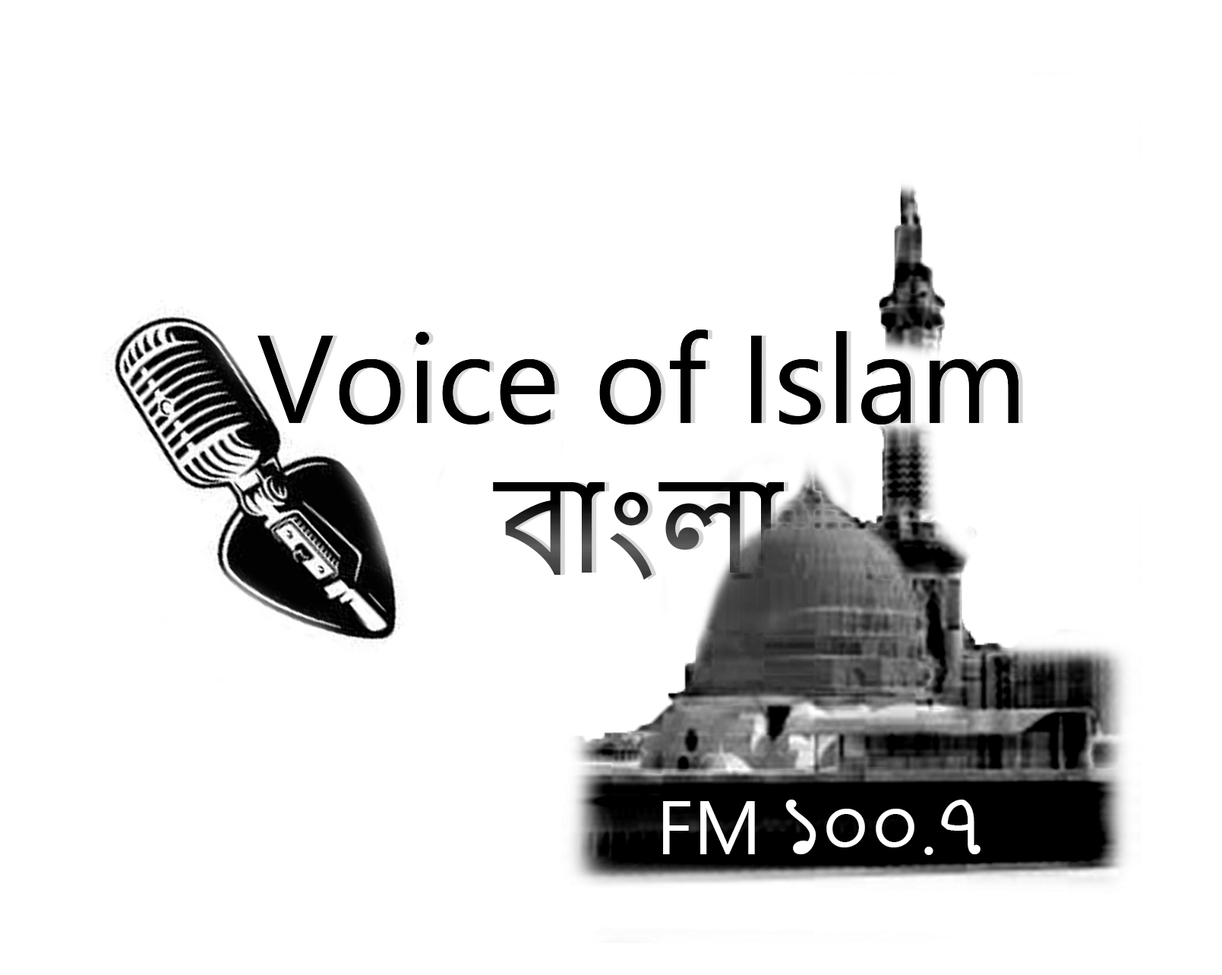
<style>
.page{position:relative;width:1222px;height:975px;background:#ffffff}
.page>*{position:absolute;margin:0}
.t1{font:124.7px "NirmalaUI";color:#000000}
.t2{font:76px "NirmalaUI";color:#ffffff}
</style>
<div class="page">
<p class="t1" style="left:258px;top:330px;width:761px;height:250px">Voice of Islam<br>       বাংলা</p>
<p class="t2" style="left:663px;top:800px;width:318px;height:55px">FM ১০০.৭</p>
</div>
